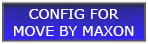
<style>
.page{position:relative;width:148px;height:44px}
.page>*{position:absolute;margin:0}
.t1{font:14px "MSReferenceSansSerif";color:#ffffff}
.t2{font:10px "MSReferenceSansSerif";color:#ffffff}
</style>
<div class="page">
<p class="t1" style="left:14px;top:9px;width:120px;height:27px;text-align:center"><span class="t2"><br></span>CONFIG FOR<br>MOVE BY MAXON</p>
</div>
